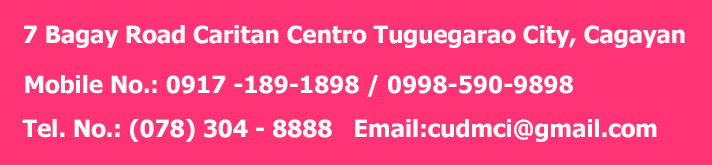
<style>
.page{position:relative;width:712px;height:165px;background:#ff3376}
.page>*{position:absolute;margin:0}
.t1{font:23.7px "Tahoma-Bold";color:#fef7f7}
.t2{font:5.7px "Tahoma-Bold";color:#fcf9f9}
</style>
<div class="page">
<p class="t1" style="left:24px;top:25px;width:661px;height:23px">7 Bagay Road Caritan Centro Tuguegarao City, Cagayan</p>
<p class="t2" style="left:22px;top:119px;width:635px;height:23px;text-align:right">Tel. No.: (078) 304 - 8888   Email:cudmci@gmail.com</p>
</div>
